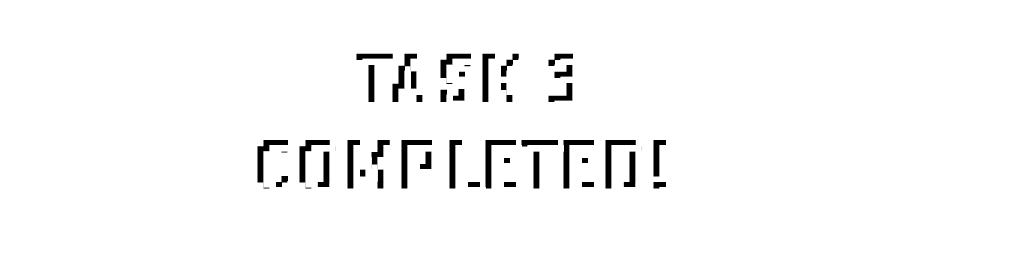
<style>
.page{position:relative;width:1024px;height:256px;background:#ffffff}
.page>*{position:absolute;margin:0}
.t1{font:72px "LoRes12OT-Bold"}
</style>
<div class="page">
<p class="t1" style="left:257px;top:53px;width:409px;height:136px;text-align:center">TASK 3<br>COMPLETED!</p>
</div>
